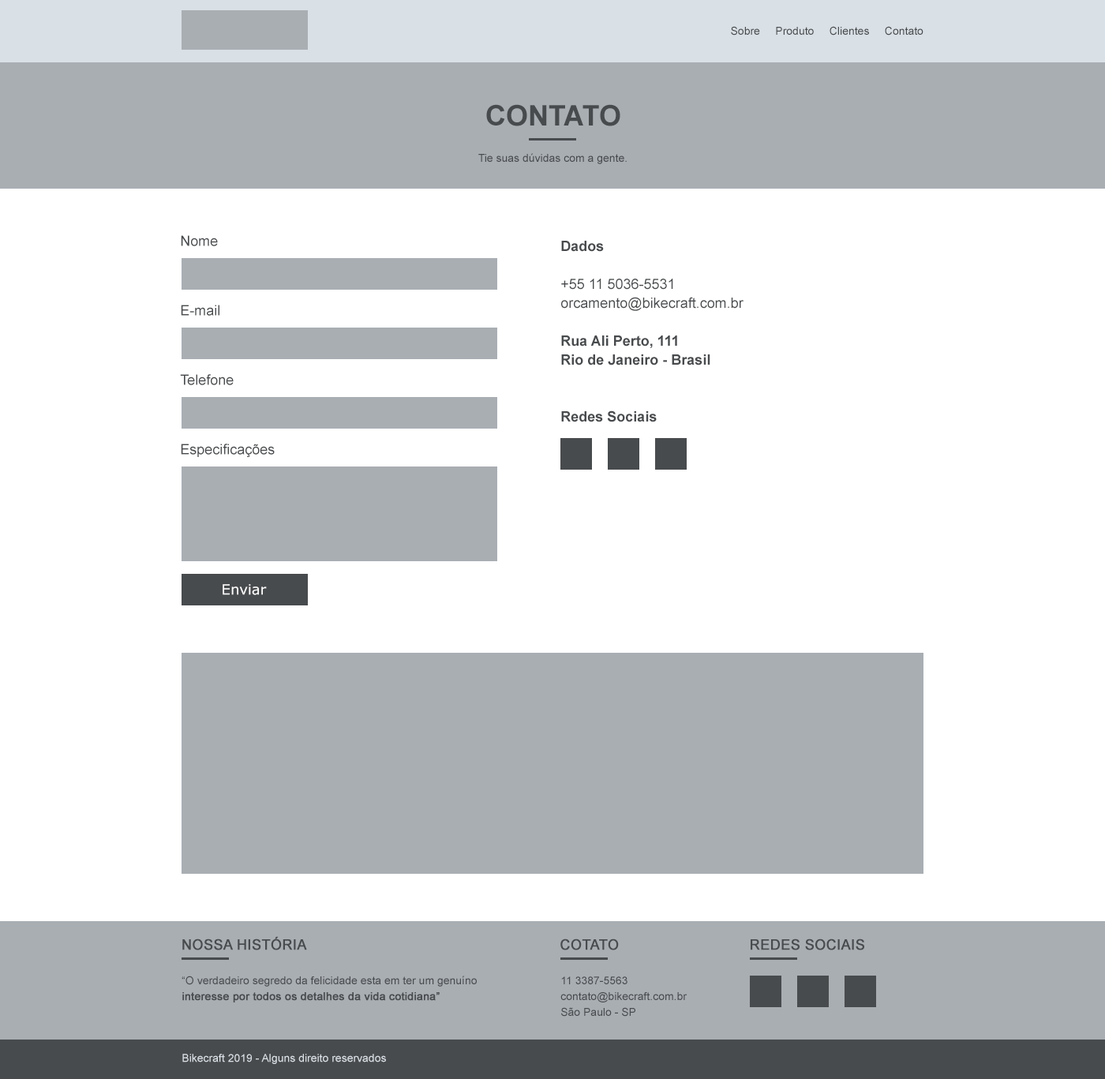
<style>
.page{position:relative;width:1105px;height:1079px;background:#ffffff}
.page>*{position:absolute;margin:0}
.t1{font:11.1px "ArialMT";color:#484b4d}
.t2{font:28.4px "Arial-BoldMT";color:#484b4d;text-transform:uppercase}
.t3{font:14.2px "ArialMT";color:#484b4d}
.t4{font:14.2px/18.9px "Arial-BoldMT";color:#484b4d}
.t5{font:14.2px/18.9px "ArialMT";color:#484b4d}
.t6{font:14.2px "Verdana";color:#ffffff}
.t7{font:14.2px "ArialMT";color:#484b4d;text-transform:uppercase;font-weight:bold}
.t8{font:11.1px/15.8px "ArialMT";color:#484b4d}
.t9{font:11.1px/15.8px "ArialMT";color:#484b4d;text-transform:uppercase}
.t10{font:11.1px/15.8px "ArialMT";color:#484b4d;font-weight:bold}
.t11{font:11.1px "ArialMT";color:#d9e0e6}
</style>
<div class="page">
<p class="t1" style="left:731px;top:26px;width:193px;height:10px">Sobre     Produto     Clientes     Contato</p>
<p class="t2" style="left:486px;top:104px;width:134px;height:22px">contato</p>
<p class="t1" style="left:478px;top:153px;width:149px;height:11px">Tie suas dúvidas com a gente.</p>
<p class="t3" style="left:181px;top:235px;width:37px;height:11px">Nome</p>
<p class="t4" style="left:561px;top:241px;width:183px;height:181px">Dados<br><br><span class="t5">+55 11 5036-5531<br>orcamento@bikecraft.com.br<br><br></span>Rua Ali Perto, 111<br>Rio de Janeiro - Brasil<br><br><br>Redes Sociais</p>
<p class="t3" style="left:181px;top:305px;width:38px;height:11px">E-mail</p>
<p class="t3" style="left:180px;top:374px;width:54px;height:11px">Telefone</p>
<p class="t3" style="left:181px;top:444px;width:94px;height:13px">Especificações</p>
<p class="t6" style="left:223px;top:584px;width:44px;height:11px">Enviar</p>
<p class="t7" style="left:182px;top:936px;width:125px;height:14px">Nossa história</p>
<p class="t7" style="left:560px;top:939px;width:59px;height:11px">cotato</p>
<p class="t7" style="left:751px;top:939px;width:113px;height:11px">redes sociais</p>
<p class="t8" style="left:182px;top:976px;width:295px;height:26px"><span class="t9">“O </span>verdadeiro segredo da felicidade esta em ter um genuíno <span class="t10">interesse por todos os detalhes da vida cotidiana”</span></p>
<p class="t8" style="left:560px;top:976px;width:128px;height:41px"><span class="t9">11 3387-5563<br></span>contato@bikecraft.com.br<br>São Paulo - SP</p>
<p class="t11" style="left:182px;top:1054px;width:204px;height:10px">Bikecraft 2019 - Alguns direito reservados</p>
</div>
